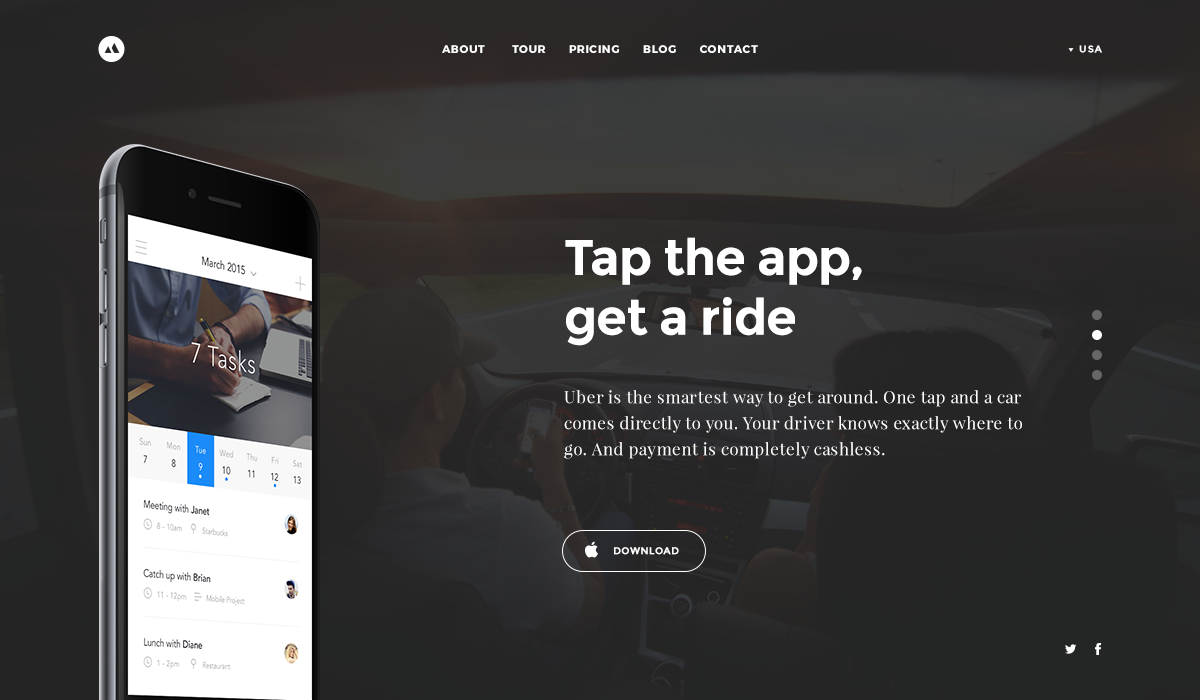
<style>
.page{position:relative;width:1200px;height:700px}
.page>*{position:absolute;margin:0}
.t1{font:11px "Montserrat-Bold";letter-spacing:0.07em;color:#ffffff;text-transform:uppercase}
.t2{font:10px "Montserrat-Bold";letter-spacing:0.08em;color:#ffffff}
.t3{font:50px/59.8px "Montserrat-Bold";letter-spacing:-0.02em;color:#ffffff}
.t4{font:17px/26px "PlayfairDisplay-Regular";letter-spacing:0.025em;color:#ffffff}
.t5{font:10px "Montserrat-Bold";letter-spacing:0.04em;color:#ffffff;text-transform:uppercase}
</style>
<div class="page">
<p class="t1" style="left:442px;top:45px;width:316px;height:8px">About       Tour      Pricing      Blog      Contact</p>
<p class="t2" style="left:1079px;top:45px;width:23px;height:8px">USA</p>
<p class="t3" style="left:565px;top:237px;width:297px;height:109px">Tap the app,<br>get a ride</p>
<p class="t4" style="left:564px;top:390px;width:458px;height:69px">Uber is the smartest way to get around. One tap and a car comes directly to you. Your driver knows exactly where to go. And payment is completely cashless.</p>
<p class="t5" style="left:614px;top:547px;width:65px;height:8px">download</p>
</div>
